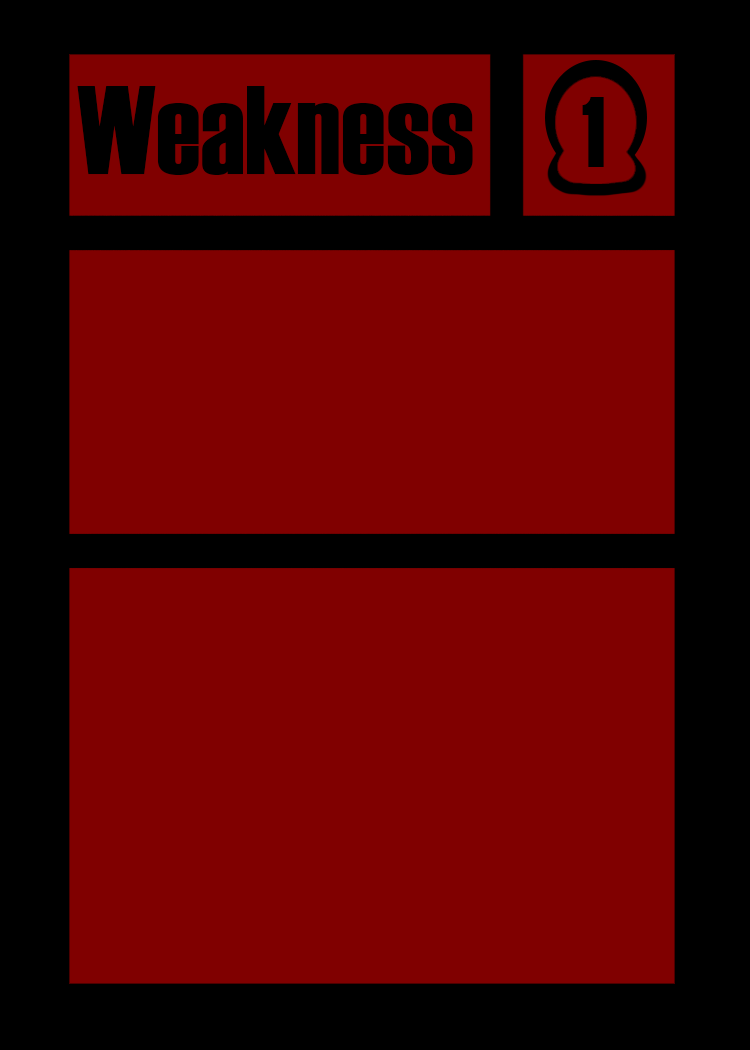
<style>
.page{position:relative;width:750px;height:1050px;background:#800000}
.page>*{position:absolute;margin:0}
.t1{font:125px "Haettenschweiler";color:#000000}
.t2{font:100px "Haettenschweiler";color:#000000}
</style>
<div class="page">
<p class="t1" style="left:77px;top:86px;width:396px;height:89px">Weakness</p>
<p class="t2" style="left:582px;top:97px;width:22px;height:70px">1</p>
</div>
